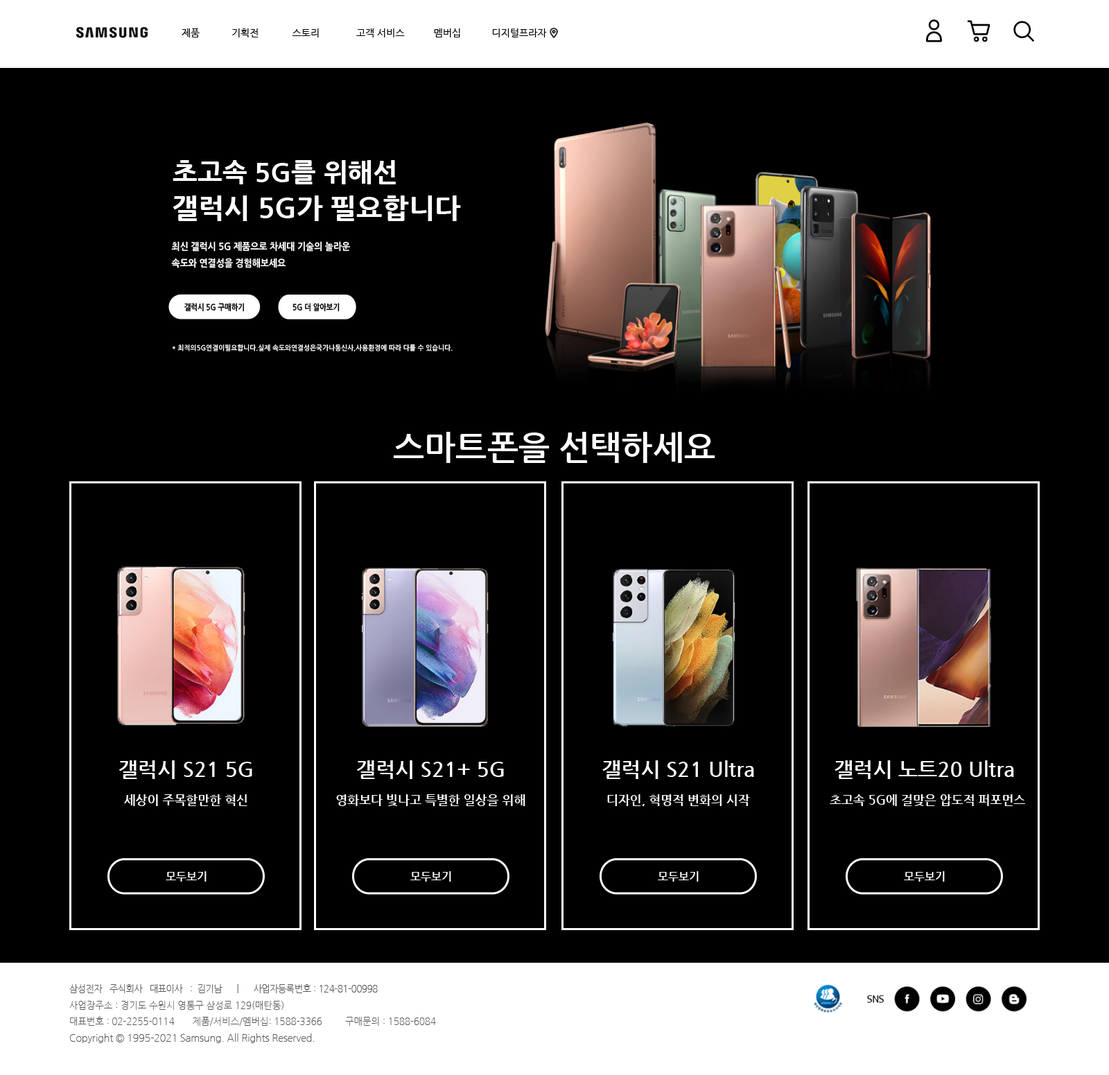
<style>
.page{position:relative;width:1109px;height:1075px;background:#000000}
.page>*{position:absolute;margin:0}
.t1{font:9.7px "NanumGothic";color:#000000}
.t2{font:26.3px "NanumGothicExtraBold";color:#ffffff}
.t3{font:27.7px "NanumGothicExtraBold";color:#ffffff}
.t4{font:9.7px/16.6px "NanumGothicExtraBold";color:#ffffff;scale:0.92 1}
.t5{font:8.3px "NanumGothicBold";color:#000000;scale:0.85 1}
.t6{font:6.9px "NanumGothicBold";color:#ffffff;scale:0.96 1}
.t7{font:33.3px "NanumGothicBold";color:#ffffff}
.t8{font:20.8px "NanumGothicBold";color:#ffffff}
.t9{font:12.5px "NanumGothicBold";color:#ffffff}
.t10{font:11.1px "NanumGothicBold";color:#ffffff}
.t11{font:9.7px "NanumGothicLight";color:#5b5b5b;scale:0.9 1}
.t12{font:9.7px "NanumGothicLight";color:#5b5b5b;scale:0.95 1}
.t13{font:9.7px "NanumGothicLight";color:#5b5b5b}
</style>
<div class="page">
<p class="t1" style="left:182px;top:28px;width:365px;height:10px">제품  기획전     스토리  고객 서비스   멤버십     디지털프라자</p>
<p class="t2" style="left:173px;top:160px;width:223px;height:24px">초고속 5G를 위해선</p>
<p class="t3" style="left:173px;top:195px;width:288px;height:26px">갤럭시 5G가 필요합니다</p>
<p class="t4" style="left:171px;top:241px;width:179px;height:27px">최신 갤럭시 5G 제품으로 차세대 기술의 놀라운<br>속도와 연결성을 경험해보세요</p>
<p class="t5" style="left:184px;top:303px;width:60px;height:9px">갤럭시 5G 구매하기</p>
<p class="t5" style="left:293px;top:303px;width:47px;height:9px">5G 더 알아보기</p>
<p class="t6" style="left:172px;top:344px;width:281px;height:8px">* 최적의5G연결이필요합니다.실제 속도와연결성은국가나통신사,사용환경에 따라 다를 수 있습니다.</p>
<p class="t7" style="left:393px;top:432px;width:322px;height:31px">스마트폰을 선택하세요</p>
<p class="t8" style="left:119px;top:760px;width:133px;height:19px">갤럭시 S21 5G</p>
<p class="t8" style="left:357px;top:760px;width:147px;height:19px">갤럭시 S21+ 5G</p>
<p class="t8" style="left:602px;top:760px;width:152px;height:19px">갤럭시 S21 Ultra</p>
<p class="t8" style="left:835px;top:760px;width:179px;height:19px">갤럭시 노트20 Ultra</p>
<p class="t9" style="left:124px;top:794px;width:123px;height:12px">세상이 주목할만한 혁신</p>
<p class="t9" style="left:336px;top:794px;width:189px;height:12px">영화보다 빛나고 특별한 일상을 위해</p>
<p class="t9" style="left:607px;top:794px;width:143px;height:12px">디자인, 혁명적 변화의 시작</p>
<p class="t9" style="left:830px;top:794px;width:195px;height:12px">초고속 5G에 걸맞은 압도적 퍼포먼스</p>
<p class="t10" style="left:166px;top:871px;width:41px;height:11px">모두보기</p>
<p class="t10" style="left:410px;top:871px;width:41px;height:11px">모두보기</p>
<p class="t10" style="left:658px;top:871px;width:41px;height:11px">모두보기</p>
<p class="t10" style="left:904px;top:871px;width:41px;height:11px">모두보기</p>
<p class="t11" style="left:69px;top:984px;width:309px;height:10px">삼성전자   주식회사   대표이사   :  김기남      |      사업자등록번호 : 124-81-00998</p>
<p class="t12" style="left:69px;top:1001px;width:215px;height:10px">사업장주소 : 경기도 수원시 영통구 삼성로 129(매탄동)</p>
<p class="t12" style="left:70px;top:1017px;width:366px;height:9px">대표번호 : 02-2255-0114       제품/서비스/멤버십: 1588-3366         구매문의 : 1588-6084</p>
<p class="t13" style="left:69px;top:1034px;width:246px;height:9px">Copyright © 1995-2021 Samsung. All Rights Reserved.</p>
</div>
